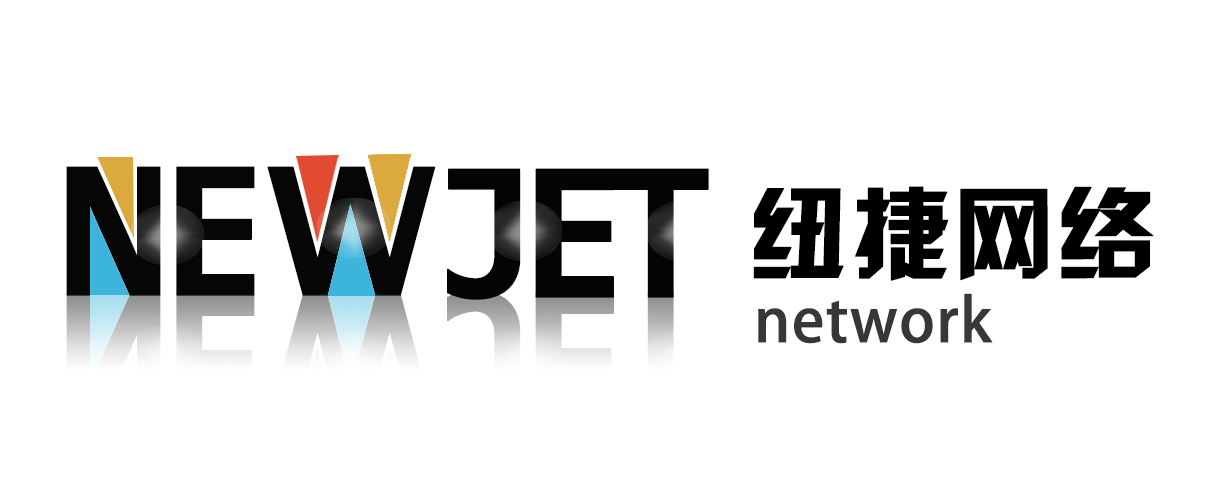
<style>
.page{position:relative;width:1210px;height:500px;background:#ffffff}
.page>*{position:absolute;margin:0}
.t1{font:200px "Consolas-Bold";color:#060606;font-weight:bold}
.t2{font:191.8px "FranklinGothic-Medium";color:#060606;font-weight:bold}
.t3{font:200px "Consolas-Bold";letter-spacing:-0.14em;color:#040404;font-weight:bold}
.t4{font:100px "JLinXin";color:#000000;font-weight:bold}
.t5{font:200px "Consolas-Bold";font-weight:bold}
.t6{font:191.8px "FranklinGothic-Medium";font-weight:bold}
.t7{font:60px "AdobeHeitiStd-Regular";color:#383737;font-weight:bold}
</style>
<div class="page">
<p class="t1" style="left:66px;top:166px;width:95px;height:130px">N</p>
<p class="t1" style="left:176px;top:166px;width:79px;height:130px">E</p>
<p class="t2" style="left:267px;top:166px;width:169px;height:130px">W</p>
<p class="t3" style="left:447px;top:168px;width:262px;height:132px">JET</p>
<p class="t4" style="left:753px;top:186px;width:401px;height:95px">纽捷网络</p>
<p class="t5" style="left:176px;top:294px;width:79px;height:130px">E</p>
<p class="t6" style="left:267px;top:294px;width:169px;height:130px">W</p>
<p class="t7" style="left:758px;top:293px;width:235px;height:51px">network</p>
</div>
